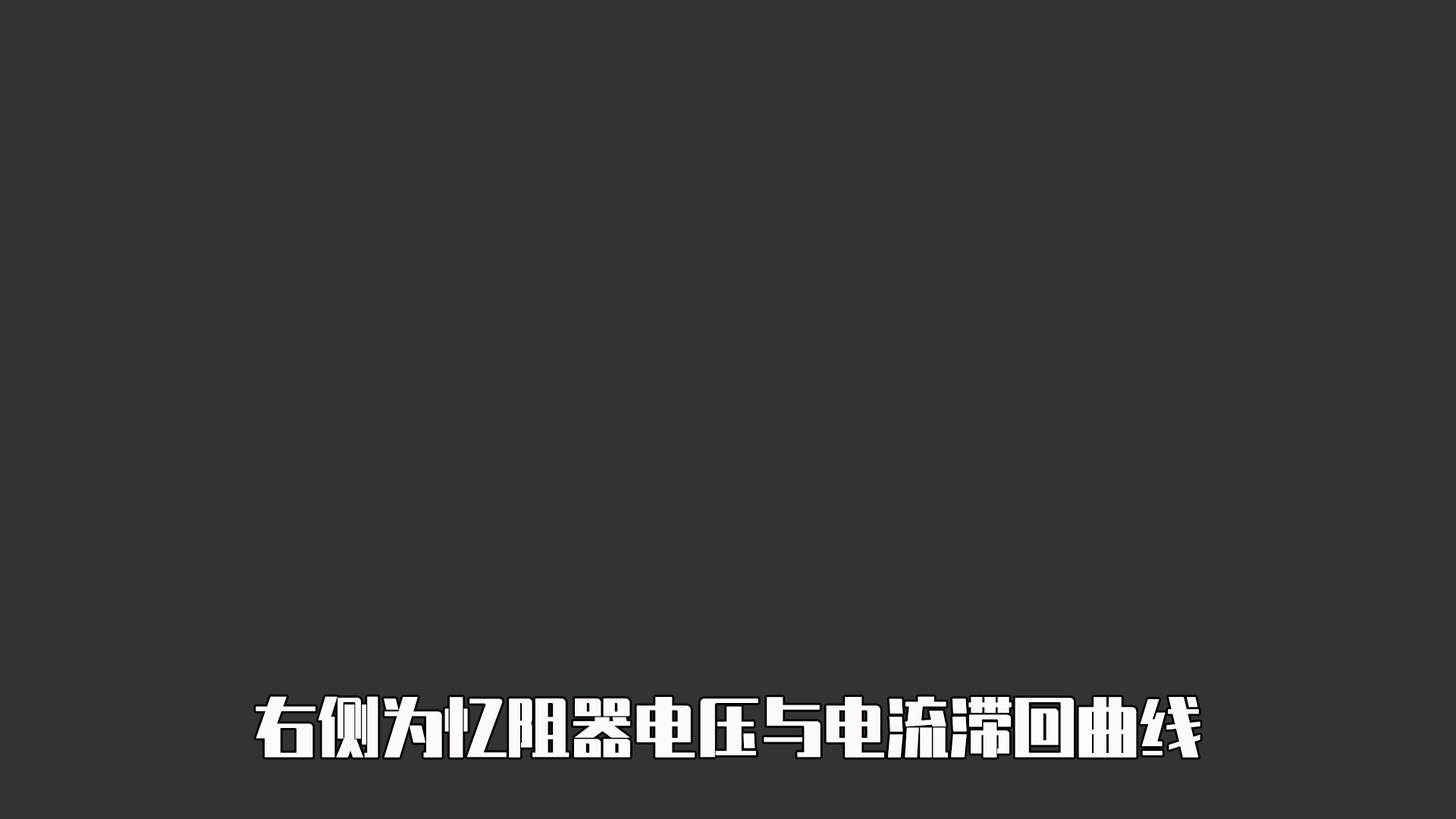
<style>
.page{position:relative;width:1456px;height:819px;background:#333333}
.page>*{position:absolute;margin:0}
.t1{font:63.2px "ZhenyanGB-Regular";color:#fefafa}
</style>
<div class="page">
<p class="t1" style="left:256px;top:696px;width:944px;height:62px">右侧为忆阻器电压与电流滞回曲线</p>
</div>
